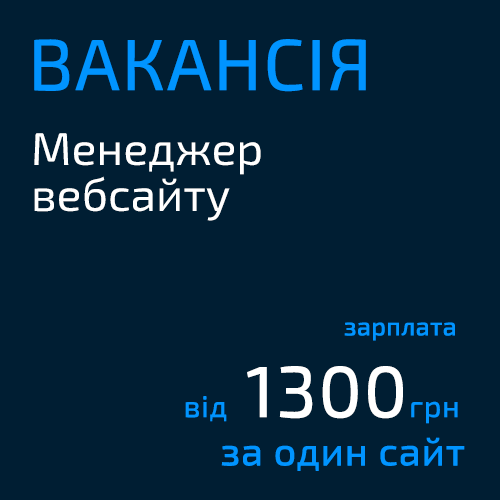
<style>
.page{position:relative;width:500px;height:500px;background:#001e33}
.page>*{position:absolute;margin:0}
.t1{font:72px "Exo2-Regular";color:#0094ff;text-transform:uppercase;font-weight:bold}
.t2{font:46.2px/48px "Exo2-Regular";color:#ffffff}
.t3{font:24.7px "Exo2-Regular";color:#0094ff;font-weight:bold}
.t4{font:72px "Exo2-Regular";color:#ffffff;font-weight:bold}
.t5{font:30px "Exo2-Regular";color:#0094ff;font-weight:bold}
.t6{font:39.2px "Exo2-Regular";color:#0094ff;font-weight:bold}
</style>
<div class="page">
<p class="t1" style="left:34px;top:39px;width:332px;height:53px">Вакансія</p>
<p class="t2" style="left:34px;top:133px;width:227px;height:88px">Менеджер <br>вебсайту</p>
<p class="t3" style="left:344px;top:322px;width:111px;height:19px">зарплата</p>
<p class="t4" style="left:185px;top:366px;width:273px;height:58px"><span class="t5">від </span>1300<span class="t5">грн</span></p>
<p class="t6" style="left:221px;top:437px;width:244px;height:34px">за один сайт</p>
</div>
